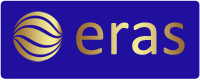
<style>
.page{position:relative;width:200px;height:80px;background:#21109e}
.page>*{position:absolute;margin:0}
.t1{font:66.3px "Calibri"}
</style>
<div class="page">
<p class="t1" style="left:76px;top:22px;width:109px;height:33px">eras</p>
</div>
